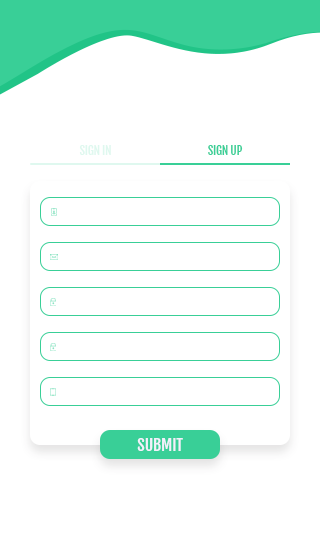
<style>
.page{position:relative;width:320px;height:533px;background:#ffffff}
.page>*{position:absolute;margin:0}
.t1{font:11.9px "FjallaOne-Regular";letter-spacing:-0.02em;color:#dff8ef}
.t2{font:11.9px "FjallaOne-Regular";letter-spacing:-0.02em;color:#39cf97}
.t3{font:16.3px "FjallaOne-Regular";letter-spacing:-0.02em;color:#f3f0fc}
</style>
<div class="page">
<p class="t1" style="left:79px;top:145px;width:32px;height:10px">SIGN IN</p>
<p class="t2" style="left:208px;top:145px;width:35px;height:10px">SIGN UP</p>
<p class="t3" style="left:137px;top:438px;width:46px;height:13px">SUBMIT</p>
</div>
